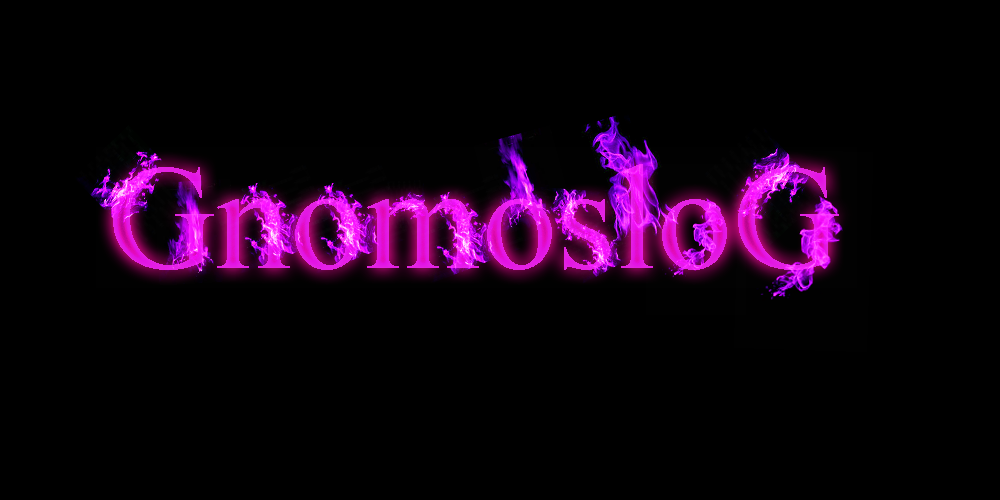
<style>
.page{position:relative;width:1000px;height:500px;background:#000000}
.page>*{position:absolute;margin:0}
.t1{font:150px "TimesNewRomanPSMT"}
</style>
<div class="page">
<p class="t1" style="left:113px;top:164px;width:726px;height:106px">GnomosloG</p>
</div>
